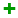
<style>
.page{position:relative;width:18px;height:18px;background:#ffffff}
.page>*{position:absolute;margin:0}
.t1{font:23px "Arial-BoldMT";color:#009b00}
</style>
<div class="page">
<p class="t1" style="left:3px;top:3px;width:13px;height:11px">+</p>
</div>
